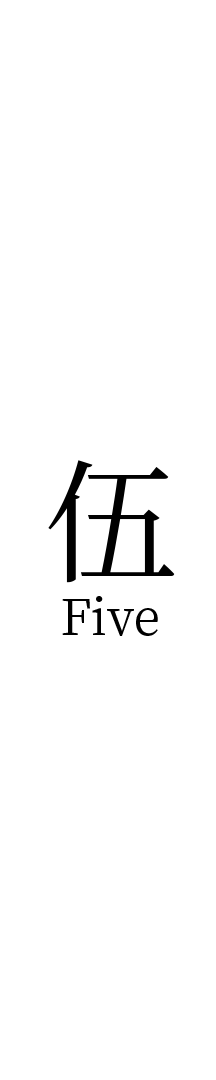
<style>
.page{position:relative;width:216px;height:1080px;background:#ffffff}
.page>*{position:absolute;margin:0}
.t1{font:133.3px "NotoSerifCJKsc-Regular";color:#000000}
.t2{font:50px "NotoSerifCJKsc-Regular";color:#000000}
</style>
<div class="page">
<p class="t1" style="left:48px;top:460px;width:127px;height:123px">伍</p>
<p class="t2" style="left:62px;top:596px;width:96px;height:40px">Five</p>
</div>
